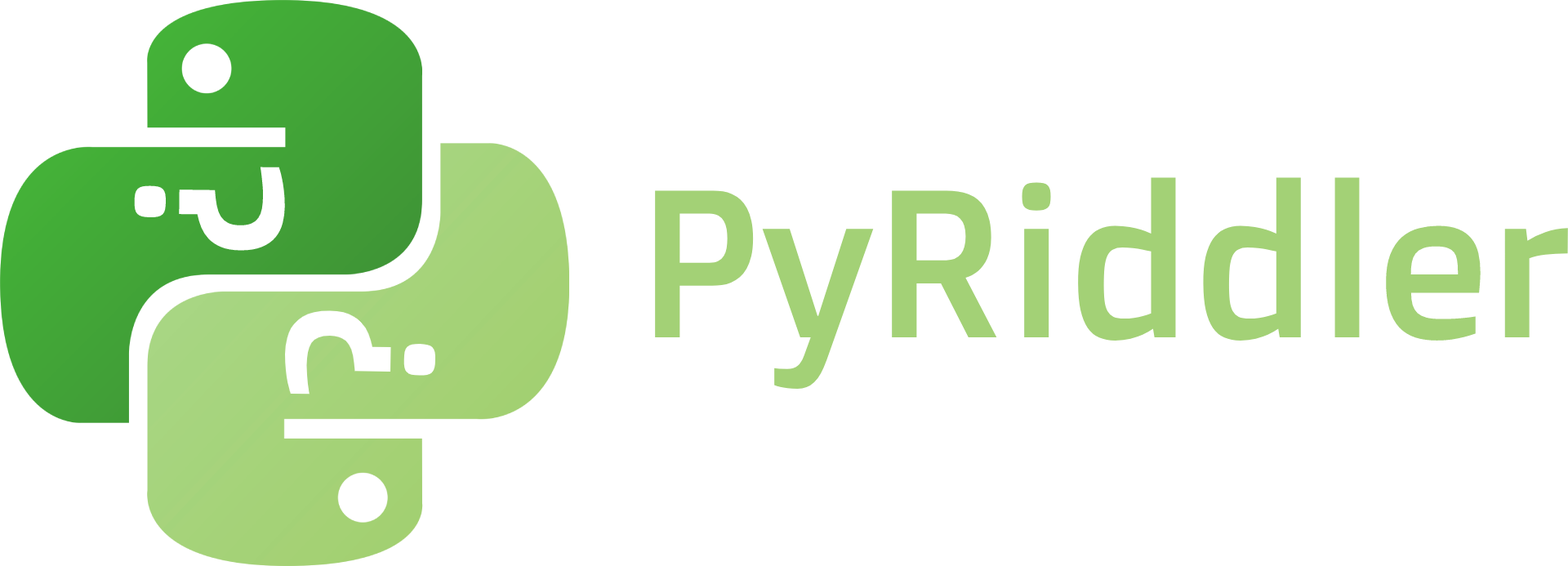
<style>
.page{position:relative;width:1568px;height:566px;background:#ffffff}
.page>*{position:absolute;margin:0}
.t1{font:210.4px "DoppioOne-Regular";color:#ffffff}
.t2{font:210.4px "DoppioOne-Regular";color:#a3d176}
</style>
<div class="page">
<p class="t1" style="left:134px;top:167px;width:151px;height:84px;rotate:91deg">?</p>
<p class="t2" style="left:655px;top:177px;width:913px;height:212px">PyRiddler</p>
<p class="t1" style="left:285px;top:310px;width:150px;height:84px;rotate:-89deg">?</p>
</div>
